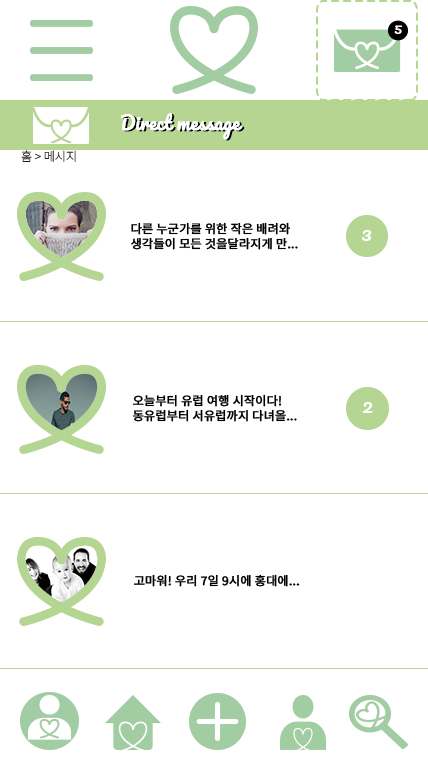
<style>
.page{position:relative;width:428px;height:768px;background:#ffffff}
.page>*{position:absolute;margin:0}
.t1{font:18px "Pacifico-Regular";color:#ffffff;font-weight:bold}
.t2{font:18px "Pacifico-Regular";font-weight:bold}
.t3{font:12px "NotoSansKR-Regular";color:#000000;font-weight:bold}
</style>
<div class="page">
<p class="t1" style="left:120px;top:113px;width:123px;height:27px">Direct message</p>
<p class="t2" style="left:122px;top:114px;width:123px;height:27px">Direct message</p>
<p class="t3" style="left:131px;top:222px;width:167px;height:28px">다른 누군가를 위한 작은 배려와 <br>생각들이 모든 것을달라지게 만...</p>
<p class="t3" style="left:133px;top:394px;width:164px;height:28px">오늘부터 유럽 여행 시작이다!<br>동유럽부터 서유럽까지 다녀올...</p>
<p class="t3" style="left:134px;top:574px;width:166px;height:13px">고마워! 우리 7일 9시에 홍대에...</p>
</div>
